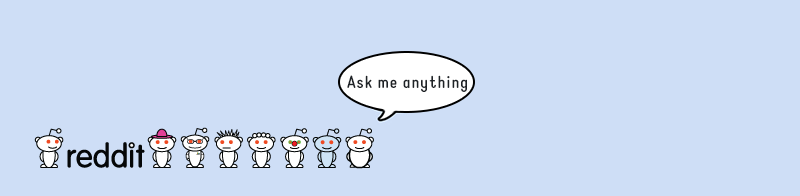
<style>
.page{position:relative;width:800px;height:196px;background:#cedef6}
.page>*{position:absolute;margin:0}
.t1{font:17.3px "StaticBold";letter-spacing:0.05em;color:#1e2226}
</style>
<div class="page">
<p class="t1" style="left:347px;top:75px;width:120px;height:17px">Ask me anything</p>
</div>
